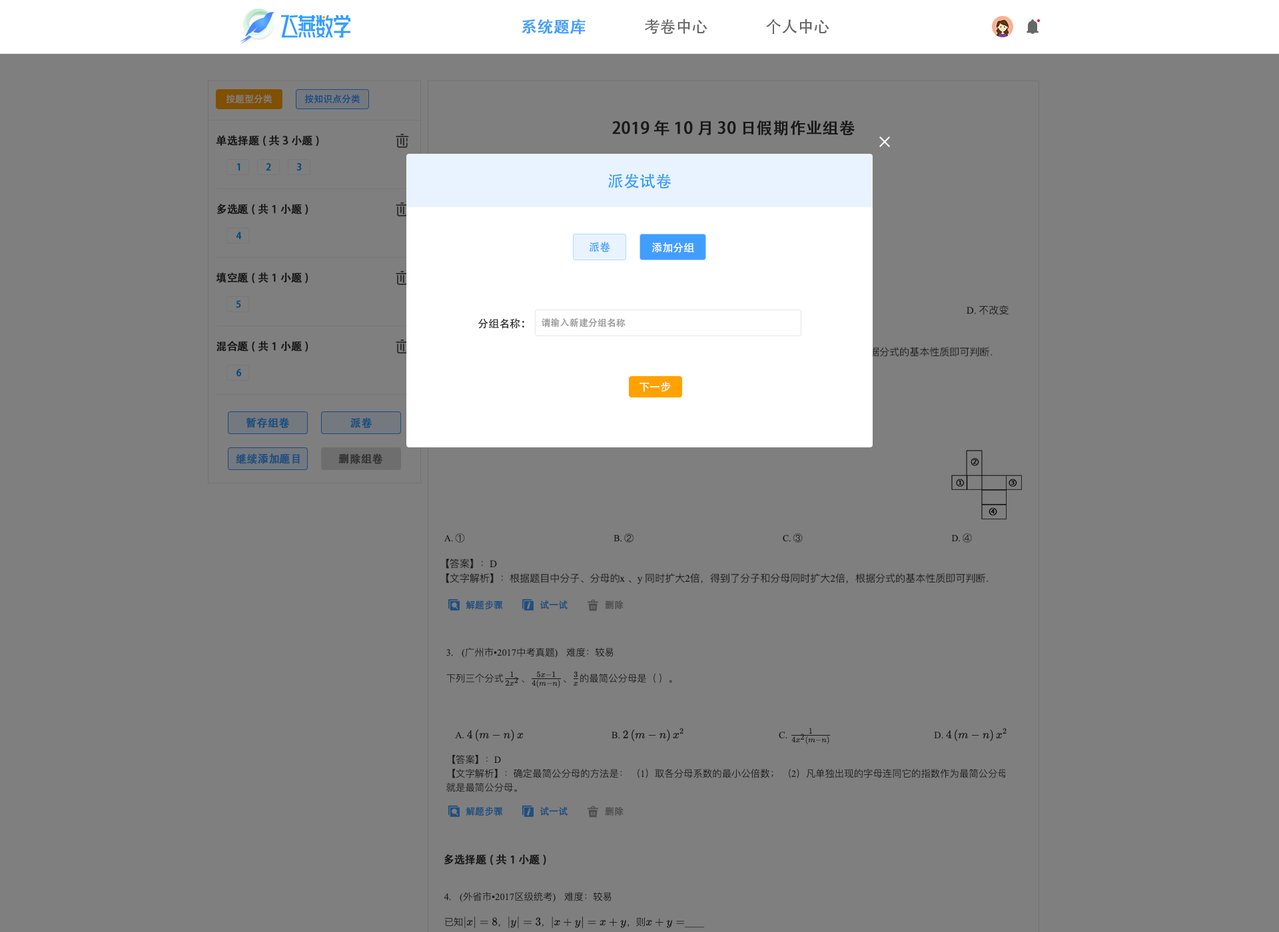
<style>
.page{position:relative;width:1279px;height:932px;background:#7f7f7f}
.page>*{position:absolute;margin:0}
.t1{font:16px "AdobeHeitiStd-Regular";color:#409eff;font-weight:bold}
.t2{font:16px "AdobeHeitiStd-Regular";color:#666666}
.t3{font:9.3px "AdobeHeitiStd-Regular";color:#7f7f7f}
.t4{font:9.3px "AdobeHeitiStd-Regular";color:#1b4a7f}
.t5{font:16px "AdobeHeitiStd-Regular";color:#191919;font-weight:bold}
.t6{font:10.7px "AdobeHeitiStd-Regular";color:#191919;font-weight:bold}
.t7{font:9.3px "AdobeHeitiStd-Regular";color:#024f7f;font-weight:bold}
.t8{font:16px "AdobeHeitiStd-Regular";color:#339dff}
.t9{font:10.7px "AdobeHeitiStd-Regular";color:#409eff}
.t10{font:10.7px "AdobeHeitiStd-Regular";color:#ffffff}
.t11{font:10.7px "AdobeHeitiStd-Regular";color:#333333}
.t12{font:9.3px "AdobeHeitiStd-Regular";color:#999999}
.t13{font:10.7px "AdobeHeitiStd-Regular";color:#194e7f;font-weight:bold}
.t14{font:10.7px "AdobeHeitiStd-Regular";color:#204f7f;font-weight:bold}
.t15{font:10.7px "AdobeHeitiStd-Regular";color:#333333;font-weight:bold}
.t16{font:9.3px "AdobeHeitiStd-Regular";color:#194e7f}
.t17{font:9.3px "AdobeHeitiStd-Regular";color:#4c4c4c}
</style>
<div class="page">
<p class="t1" style="left:522px;top:19px;width:63px;height:16px">系统题库</p>
<p class="t2" style="left:644px;top:19px;width:63px;height:15px">考卷中心</p>
<p class="t2" style="left:766px;top:19px;width:63px;height:15px">个人中心</p>
<p class="t3" style="left:226px;top:94px;width:46px;height:10px">按题型分类</p>
<p class="t4" style="left:304px;top:94px;width:56px;height:10px">按知识点分类</p>
<p class="t5" style="left:612px;top:120px;width:243px;height:16px">2019年10月30日假期作业组卷</p>
<p class="t6" style="left:216px;top:135px;width:103px;height:12px">单选择题(共3小题)</p>
<p class="t7" style="left:236px;top:163px;width:4px;height:8px">1</p>
<p class="t7" style="left:266px;top:163px;width:5px;height:8px">2</p>
<p class="t7" style="left:296px;top:163px;width:6px;height:8px">3</p>
<p class="t8" style="left:608px;top:174px;width:63px;height:14px">派发试卷</p>
<p class="t6" style="left:216px;top:204px;width:92px;height:11px">多选题(共1小题)</p>
<p class="t7" style="left:236px;top:232px;width:6px;height:8px">4</p>
<p class="t9" style="left:589px;top:242px;width:21px;height:10px">派卷</p>
<p class="t10" style="left:652px;top:242px;width:42px;height:11px">添加分组</p>
<p class="t6" style="left:216px;top:272px;width:92px;height:12px">填空题(共1小题)</p>
<p class="t7" style="left:236px;top:300px;width:5px;height:8px">5</p>
<p class="t11" style="left:478px;top:318px;width:46px;height:11px">分组名称：</p>
<p class="t12" style="left:541px;top:318px;width:84px;height:10px">请输入新建分组名称</p>
<p class="t6" style="left:216px;top:341px;width:92px;height:11px">混合题(共1小题)</p>
<p class="t7" style="left:236px;top:369px;width:6px;height:8px">6</p>
<p class="t10" style="left:639px;top:382px;width:32px;height:10px">下一步</p>
<p class="t13" style="left:246px;top:418px;width:44px;height:10px">暂存组卷</p>
<p class="t13" style="left:350px;top:418px;width:22px;height:10px">派卷</p>
<p class="t14" style="left:236px;top:454px;width:64px;height:10px">继续添加题目</p>
<p class="t15" style="left:338px;top:454px;width:45px;height:10px">删除组卷</p>
<p class="t16" style="left:466px;top:601px;width:37px;height:9px">解题步骤</p>
<p class="t16" style="left:540px;top:601px;width:27px;height:8px">试一试</p>
<p class="t17" style="left:605px;top:601px;width:18px;height:8px">删除</p>
<p class="t16" style="left:466px;top:807px;width:37px;height:10px">解题步骤</p>
<p class="t16" style="left:540px;top:807px;width:27px;height:9px">试一试</p>
<p class="t17" style="left:605px;top:807px;width:18px;height:9px">删除</p>
<p class="t6" style="left:444px;top:855px;width:102px;height:11px">多选择题(共1小题)</p>
</div>
